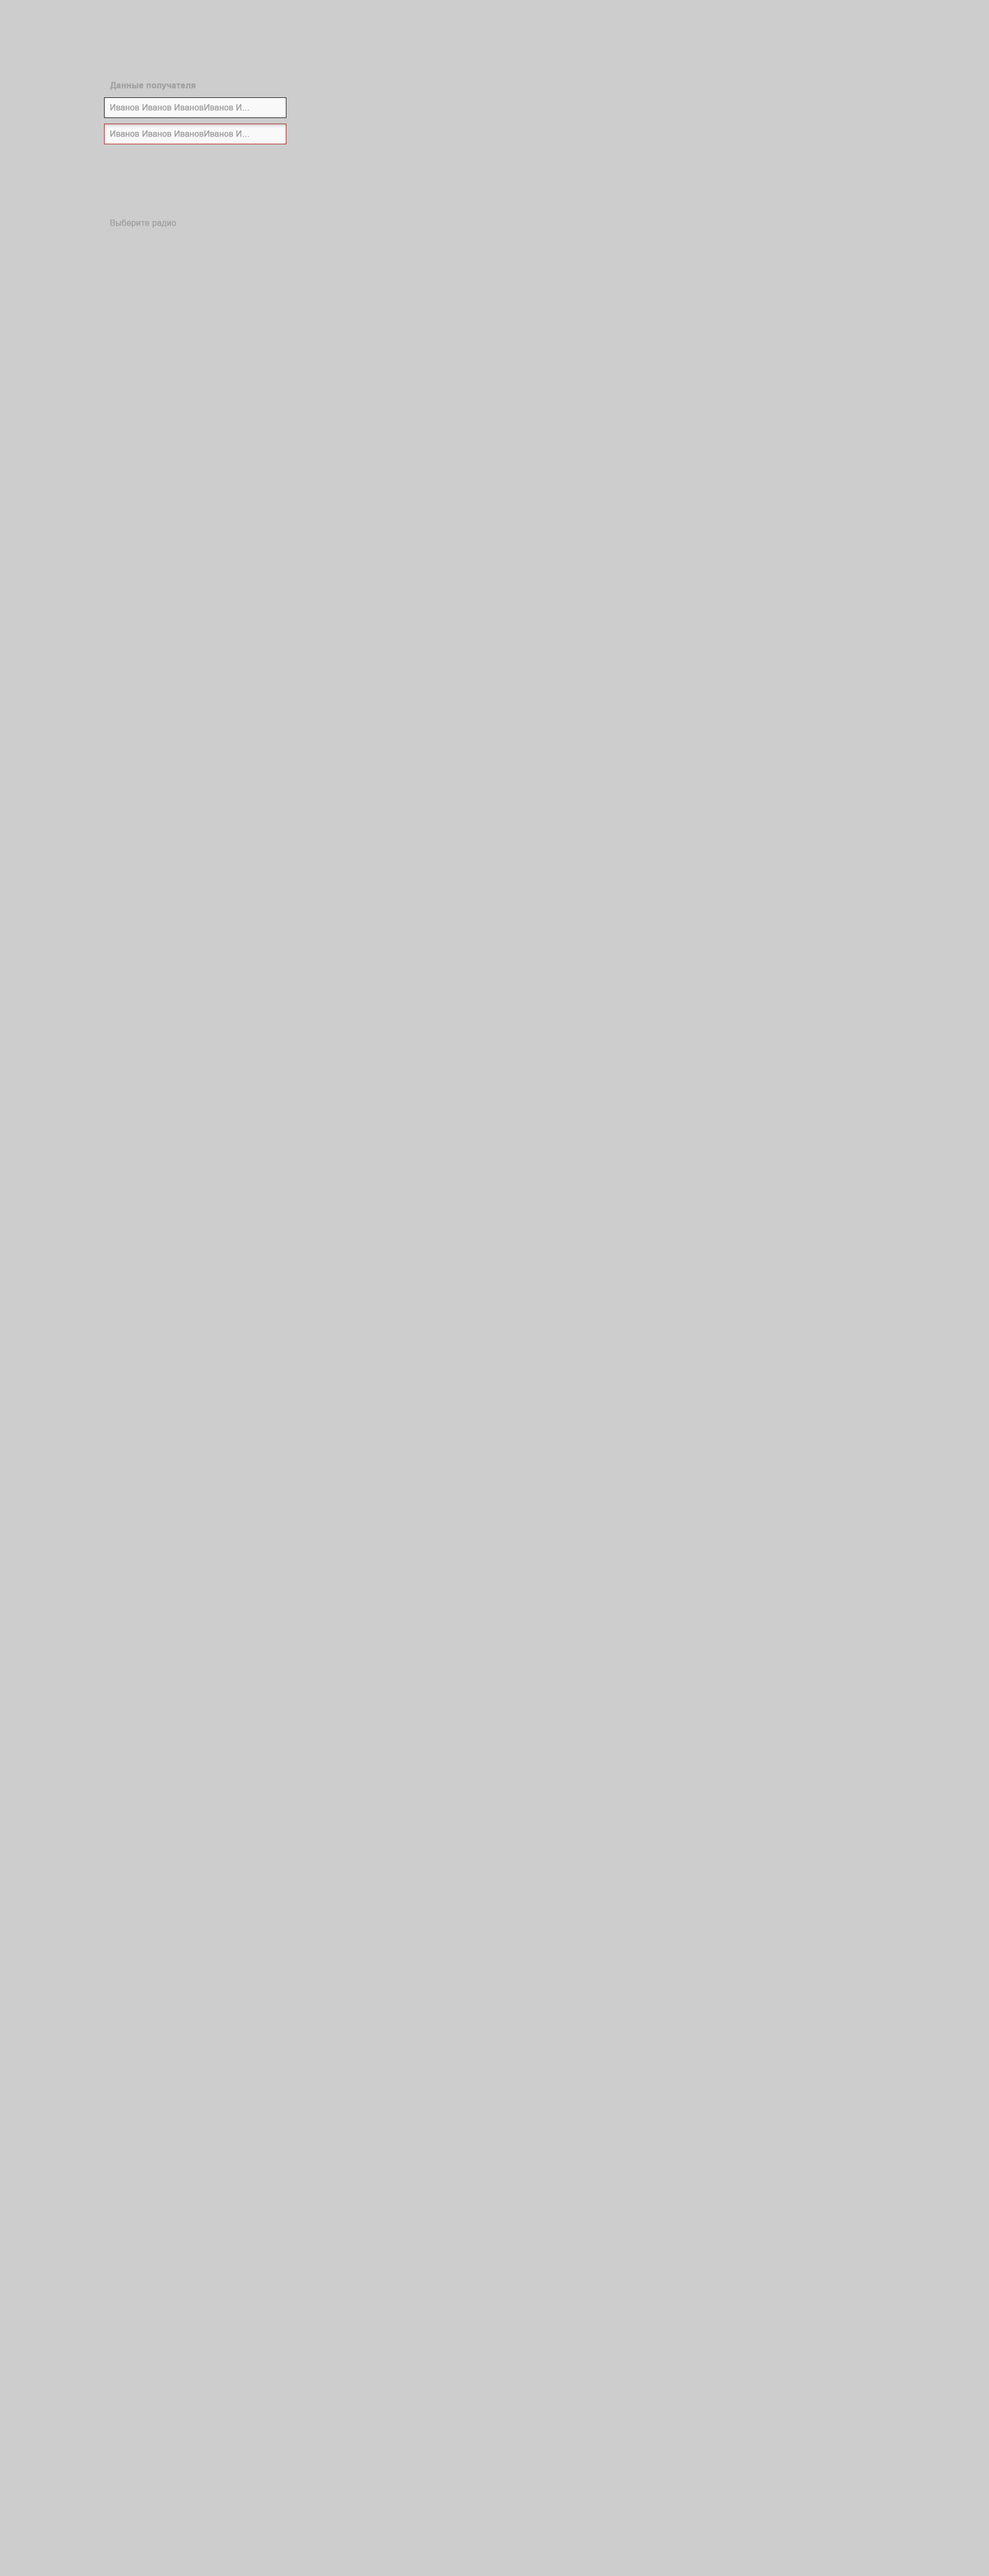
<style>
.page{position:relative;width:989px;height:2576px;background:#cdcdcd}
.page>*{position:absolute;margin:0}
.t1{font:8.2px "Arial-BoldMT";color:#a3a3a3;font-weight:bold}
.t2{font:8.2px "ArialMT";color:#a3a3a3;font-weight:bold}
</style>
<div class="page">
<p class="t1" style="left:110px;top:82px;width:86px;height:8px">Данные получателя</p>
<p class="t2" style="left:110px;top:104px;width:139px;height:7px">Иванов Иванов ИвановИванов И...</p>
<p class="t2" style="left:110px;top:130px;width:139px;height:7px">Иванов Иванов ИвановИванов И...</p>
<p class="t2" style="left:110px;top:219px;width:66px;height:9px">Выберите радио</p>
</div>
